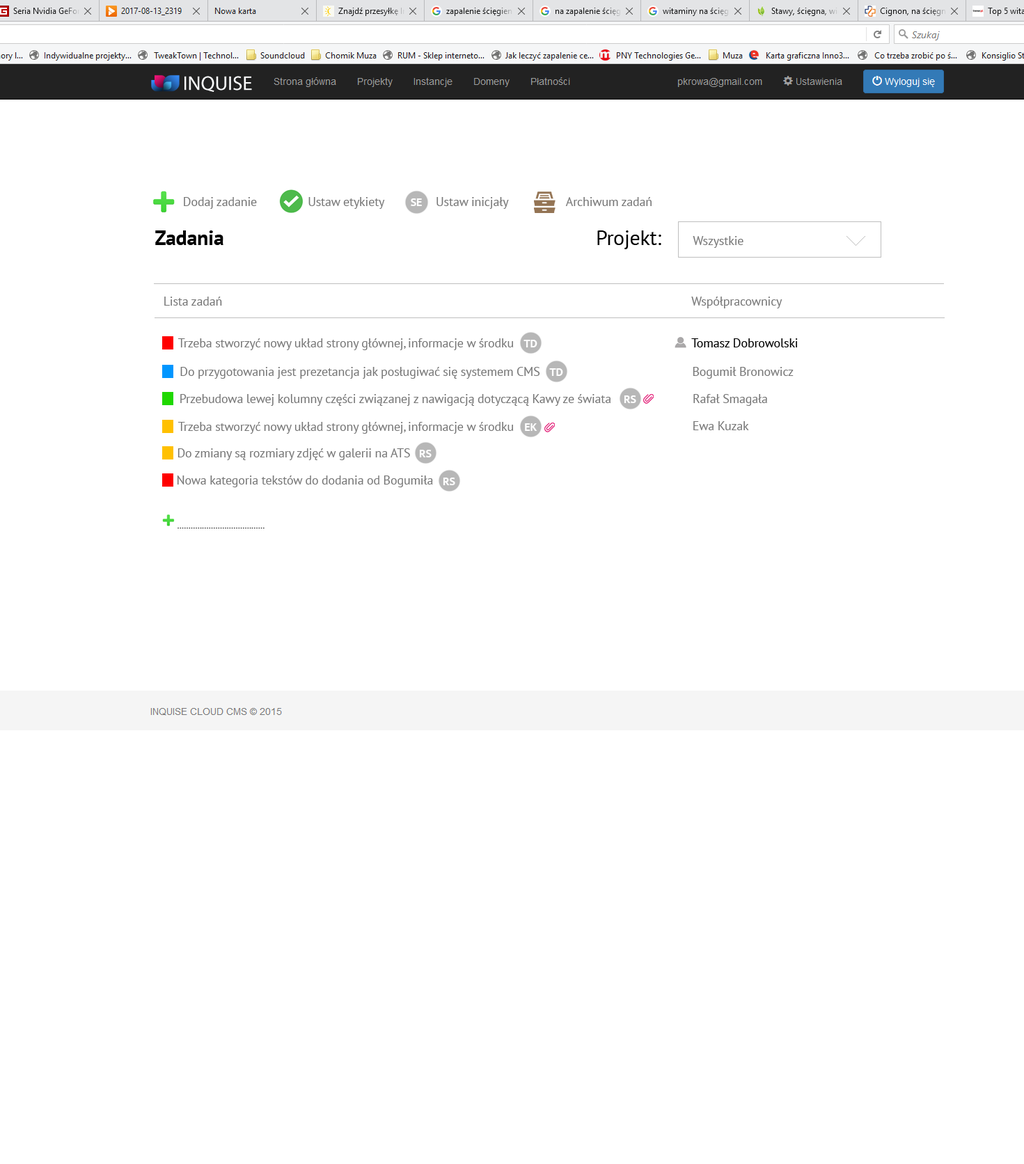
<style>
.page{position:relative;width:1024px;height:1164px;background:#ffffff}
.page>*{position:absolute;margin:0}
.t1{font:12.5px "PTSans-Regular";letter-spacing:-0.01em;color:#777777}
.t2{font:11.1px "PTSans-Bold";letter-spacing:-0.01em;color:#ffffff}
.t3{font:20.9px "PTSans-Bold";letter-spacing:-0.01em;color:#000000}
.t4{font:20.9px "PTSans-Regular";letter-spacing:-0.01em;color:#000000}
.t5{font:12.5px "PTSans-Regular";letter-spacing:-0.01em;color:#000000}
.t6{font:8.4px "PTSans-Regular";letter-spacing:-0.01em;color:#000000}
</style>
<div class="page">
<p class="t1" style="left:184px;top:197px;width:73px;height:12px">Dodaj zadanie</p>
<p class="t1" style="left:308px;top:197px;width:77px;height:12px">Ustaw etykiety</p>
<p class="t1" style="left:437px;top:197px;width:72px;height:12px">Ustaw inicjały</p>
<p class="t1" style="left:565px;top:197px;width:87px;height:9px">Archiwum zadań</p>
<p class="t2" style="left:411px;top:198px;width:11px;height:8px">SE</p>
<p class="t3" style="left:155px;top:230px;width:69px;height:15px">Zadania</p>
<p class="t4" style="left:597px;top:230px;width:64px;height:19px">Projekt:</p>
<p class="t1" style="left:693px;top:236px;width:51px;height:12px">Wszystkie</p>
<p class="t1" style="left:164px;top:297px;width:58px;height:9px">Lista zadań</p>
<p class="t1" style="left:691px;top:297px;width:92px;height:11px">Współpracownicy</p>
<p class="t1" style="left:178px;top:338px;width:335px;height:12px">Trzeba stworzyć nowy układ strony głównej, informacje w środku</p>
<p class="t2" style="left:524px;top:340px;width:14px;height:7px">TD</p>
<p class="t5" style="left:691px;top:338px;width:107px;height:9px">Tomasz Dobrowolski</p>
<p class="t1" style="left:180px;top:367px;width:360px;height:12px">Do przygotowania jest prezetancja jak posługiwać się systemem CMS</p>
<p class="t2" style="left:549px;top:368px;width:14px;height:8px">TD</p>
<p class="t1" style="left:693px;top:367px;width:101px;height:12px">Bogumił Bronowicz</p>
<p class="t1" style="left:180px;top:394px;width:431px;height:12px">Przebudowa lewej kolumny części związanej z nawigacją dotyczącą Kawy ze świata</p>
<p class="t2" style="left:624px;top:395px;width:12px;height:8px">RS</p>
<p class="t1" style="left:694px;top:394px;width:73px;height:12px">Rafał Smagała</p>
<p class="t1" style="left:178px;top:422px;width:335px;height:12px">Trzeba stworzyć nowy układ strony głównej, informacje w środku</p>
<p class="t2" style="left:525px;top:423px;width:13px;height:8px">EK</p>
<p class="t1" style="left:694px;top:421px;width:55px;height:9px">Ewa Kuzak</p>
<p class="t1" style="left:178px;top:448px;width:232px;height:12px">Do zmiany są rozmiary zdjęć w galerii na ATS</p>
<p class="t2" style="left:419px;top:450px;width:13px;height:7px">RS</p>
<p class="t1" style="left:177px;top:476px;width:256px;height:11px">Nowa kategoria tekstów do dodania od Bogumiła</p>
<p class="t2" style="left:443px;top:478px;width:12px;height:7px">RS</p>
<p class="t6" style="left:178px;top:528px;width:87px;height:0px">.......................................</p>
</div>
